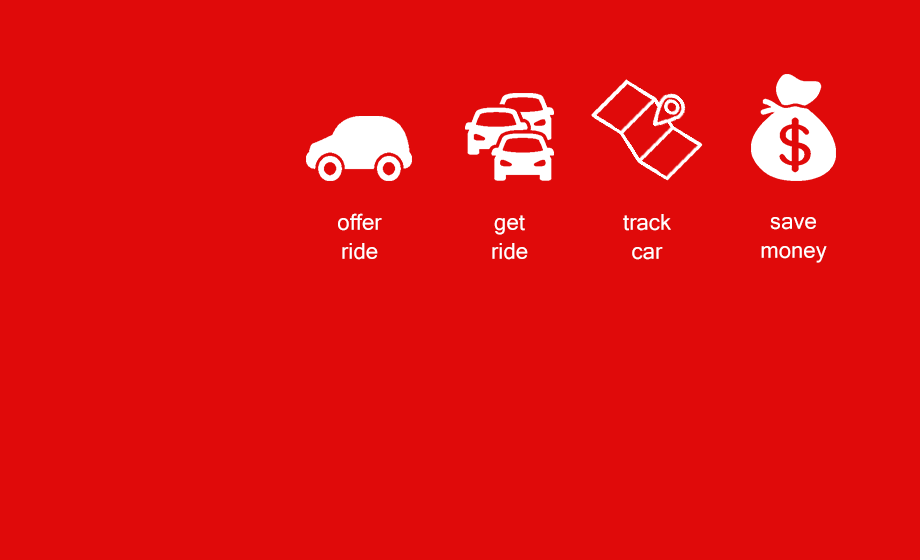
<style>
.page{position:relative;width:920px;height:560px;background:#e00a0a}
.page>*{position:absolute;margin:0}
.t1{font:24px "Gautami";color:#ffffff}
</style>
<div class="page">
<p class="t1" style="left:338px;top:213px;width:44px;height:47px;text-align:center">offer<br>ride</p>
<p class="t1" style="left:492px;top:215px;width:36px;height:45px;text-align:center">get<br>ride</p>
<p class="t1" style="left:623px;top:214px;width:48px;height:46px;text-align:center">track<br>car</p>
<p class="t1" style="left:761px;top:217px;width:66px;height:46px;text-align:center">save<br>money</p>
</div>
